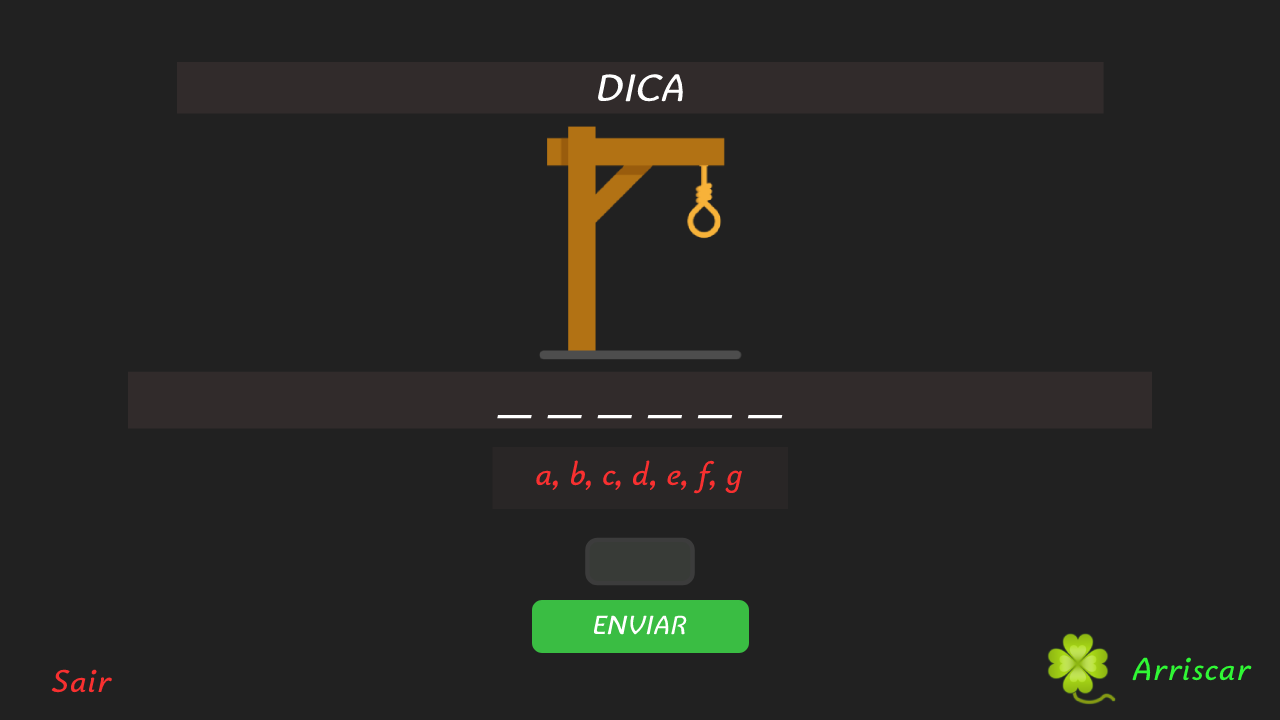
<style>
.page{position:relative;width:1280px;height:720px;background:#212121}
.page>*{position:absolute;margin:0}
.t1{font:40.7px "Bainsley-Italic";color:#ffffff}
.t2{font:65px "Bainsley-Italic";color:#ffffff}
.t3{font:34px "Bainsley-Italic";color:#f83030}
.t4{font:28px "Bainsley-Italic";color:#ffffff}
.t5{font:34px "Bainsley-Italic";color:#30f835}
</style>
<div class="page">
<p class="t1" style="left:598px;top:74px;width:85px;height:28px">DICA</p>
<p class="t2" style="left:497px;top:414px;width:286px;height:5px">_ _ _ _ _ _</p>
<p class="t3" style="left:536px;top:460px;width:207px;height:34px">a, b, c, d, e, f, g</p>
<p class="t4" style="left:593px;top:615px;width:94px;height:20px">ENVIAR</p>
<p class="t5" style="left:1132px;top:657px;width:120px;height:24px">Arriscar</p>
<p class="t3" style="left:51px;top:669px;width:61px;height:24px">Sair</p>
</div>
